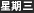
<style>
.page{position:relative;width:34px;height:13px}
.page>*{position:absolute;margin:0}
.t1{font:11.1px "AdobeHeitiStd-Regular";color:#ffffff}
</style>
<div class="page">
<p class="t1" style="left:0px;top:1px;width:33px;height:10px">星期三</p>
</div>
